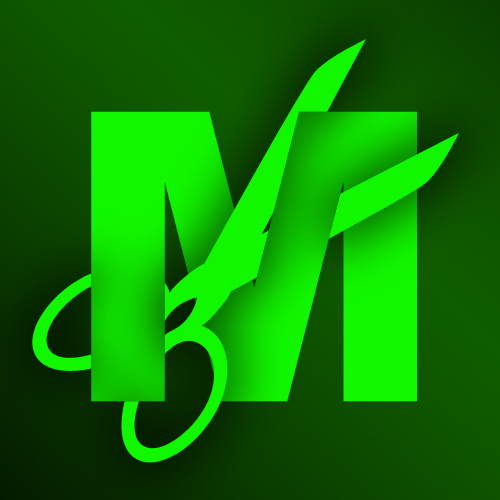
<style>
.page{position:relative;width:500px;height:500px}
.page>*{position:absolute;margin:0}
.t1{font:404.2px "Arial-Black"}
</style>
<div class="page">
<p class="t1" style="left:91px;top:111px;width:326px;height:291px">M</p>
</div>
